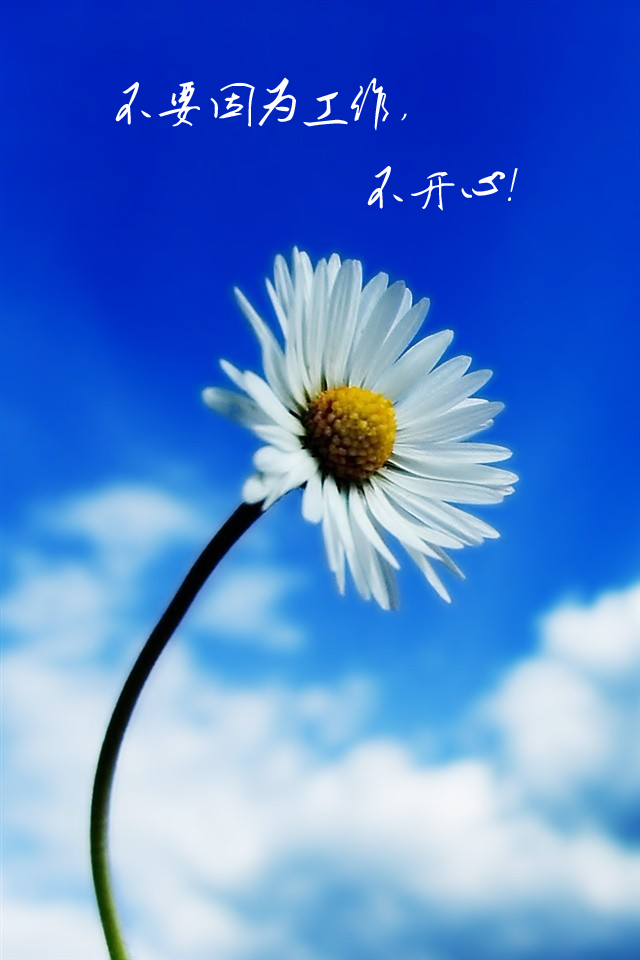
<style>
.page{position:relative;width:640px;height:960px}
.page>*{position:absolute;margin:0}
.t1{font:48px "Ò¶¸ùÓÑ¸Ö±ÊÐÐÊé¼òÌå";color:#fefefe}
</style>
<div class="page">
<p class="t1" style="left:115px;top:77px;width:403px;height:134px">不要因为工作，<br>          不开心！</p>
</div>
